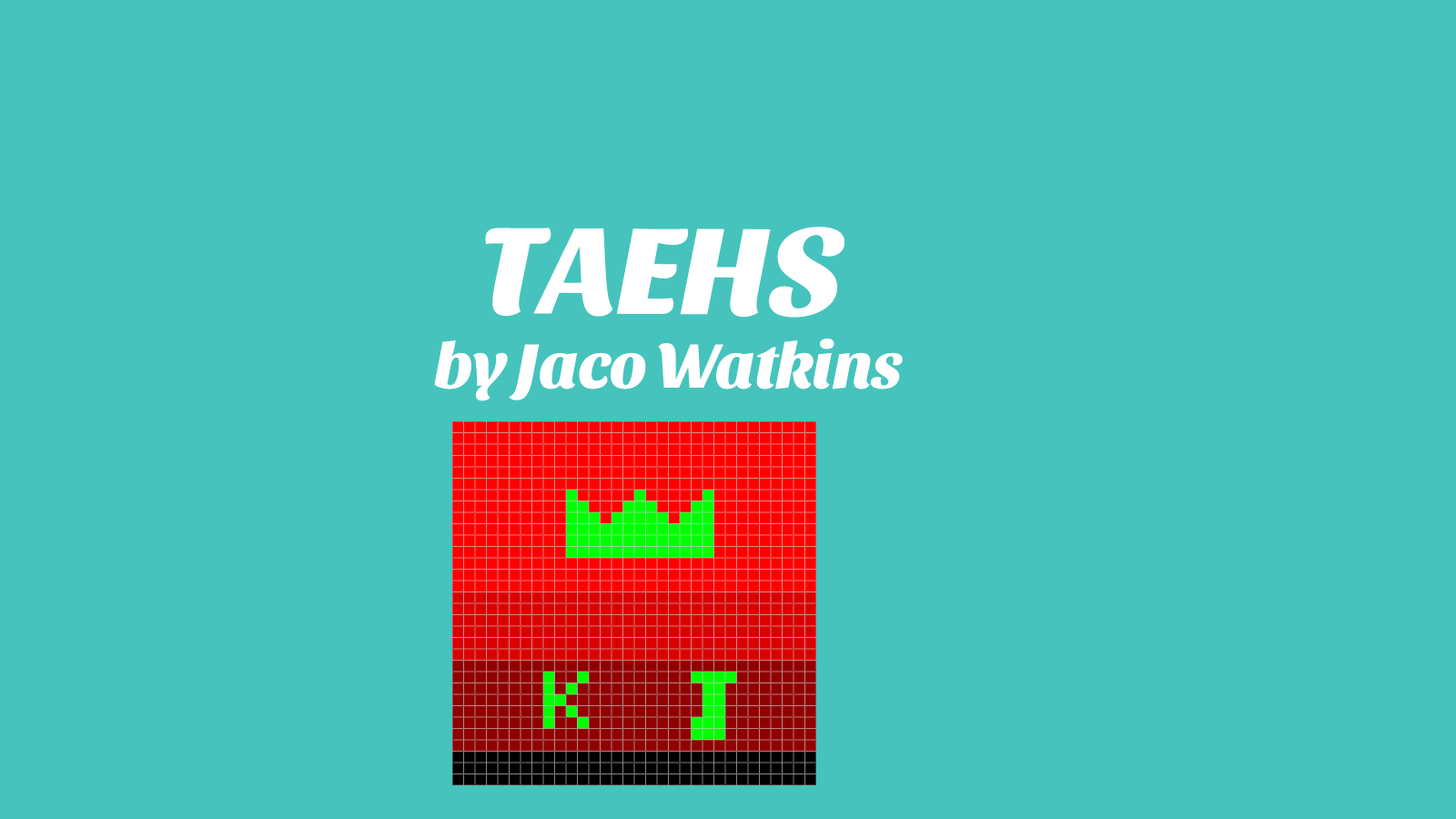
<style>
.page{position:relative;width:1456px;height:819px;background:#46c3bd}
.page>*{position:absolute;margin:0}
.t1{font:129.2px "Sansita-ExtraBoldItalic";color:#ffffff}
.t2{font:65.5px "Sansita-ExtraBoldItalic";color:#ffffff}
</style>
<div class="page">
<p class="t1" style="left:485px;top:227px;width:360px;height:91px">TAEHS</p>
<p class="t2" style="left:434px;top:339px;width:469px;height:62px">by Jaco Watkins</p>
</div>
